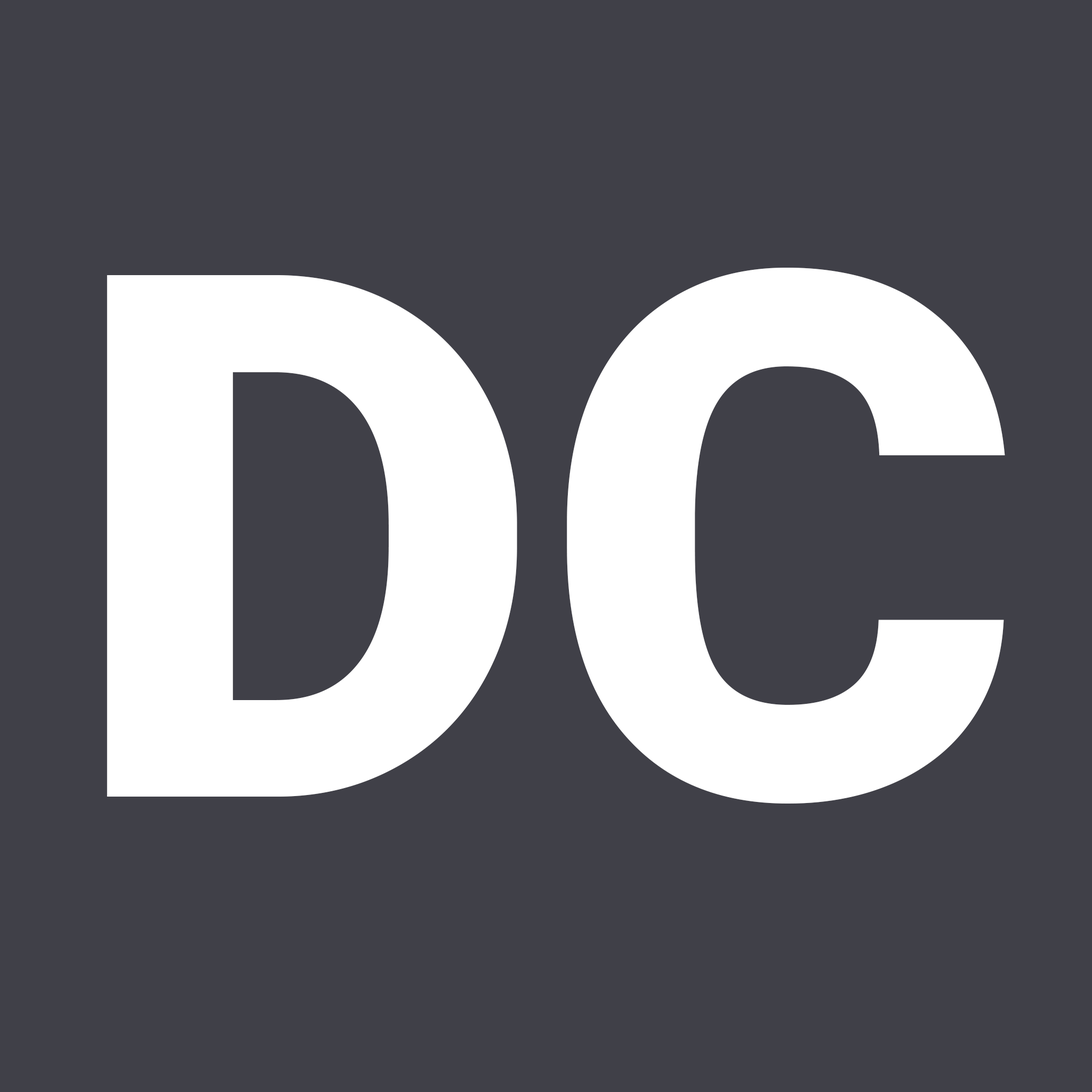
<style>
.page{position:relative;width:1092px;height:1092px;background:#404048}
.page>*{position:absolute;margin:0}
.t1{font:733.9px "Roboto-Black";color:#ffffff}
</style>
<div class="page">
<p class="t1" style="left:107px;top:268px;width:898px;height:536px">DC</p>
</div>
